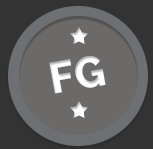
<style>
.page{position:relative;width:153px;height:149px;background:#6c6969}
.page>*{position:absolute;margin:0}
.t1{font:43.9px "Raleway-ExtraBold";color:#ffffff}
</style>
<div class="page">
<p class="t1" style="left:49px;top:56px;width:57px;height:38px;rotate:-10deg">FG</p>
</div>
